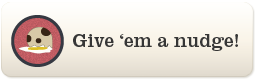
<style>
.page{position:relative;width:255px;height:80px}
.page>*{position:absolute;margin:0}
.t1{font:19.3px "ClarendonLTStd";letter-spacing:-0.005em;color:#363636}
</style>
<div class="page">
<p class="t1" style="left:73px;top:34px;width:165px;height:17px">Give ‘em a nudge!</p>
</div>
